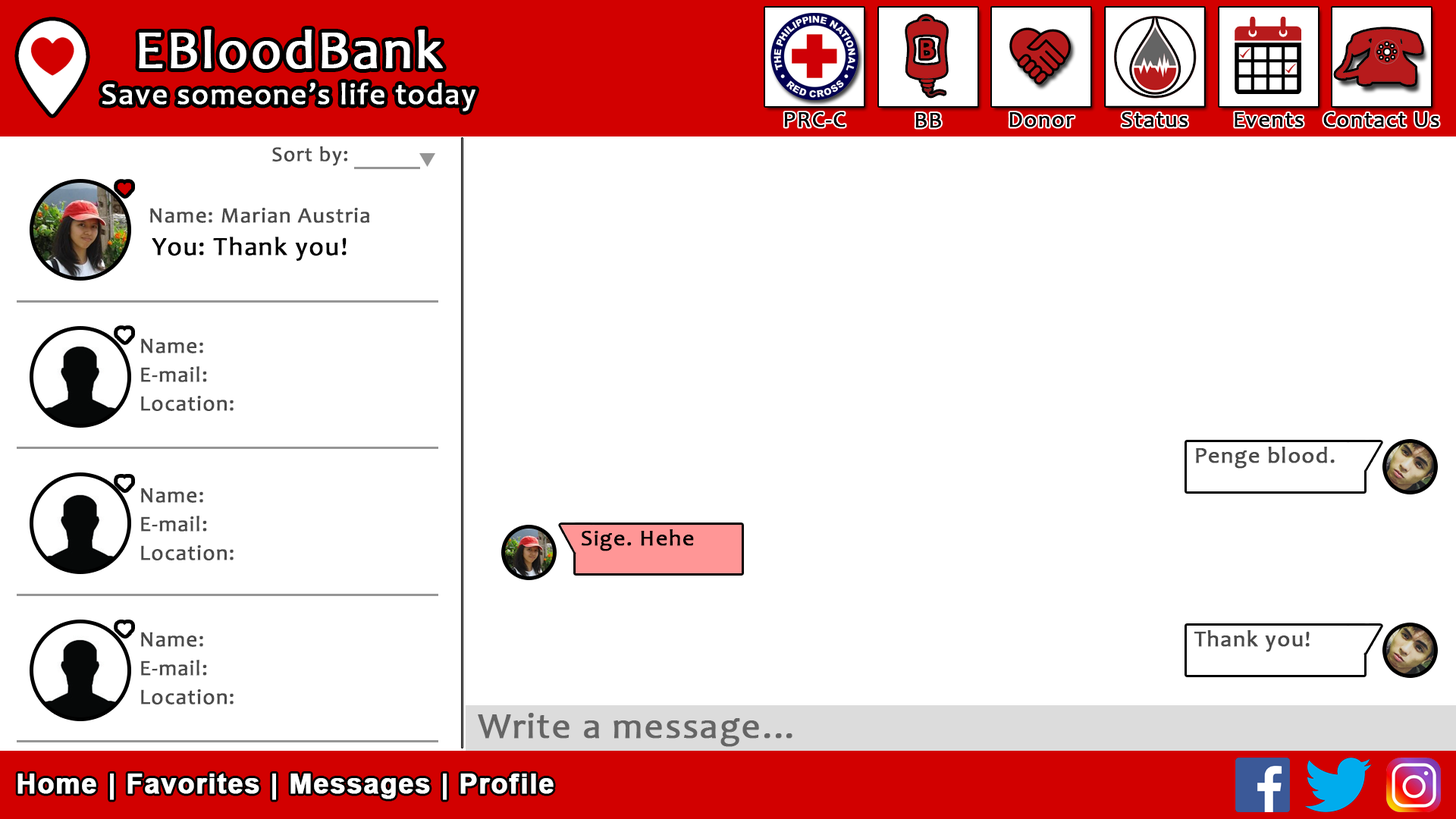
<style>
.page{position:relative;width:1456px;height:819px;background:#ffffff}
.page>*{position:absolute;margin:0}
.t1{font:30.3px "Candara";letter-spacing:0.03em;color:#ffffff;font-weight:bold}
.t2{font:54.6px "Candara";letter-spacing:0.03em;color:#ffffff;font-weight:bold}
.t3{font:22.7px "Candara";letter-spacing:0.03em;color:#000000;font-weight:bold}
.t4{font:20.9px "Candara";letter-spacing:0.03em;color:#4a4a4a;font-weight:bold}
.t5{font:21.8px "Candara";letter-spacing:0.03em;color:#4a4a4a;font-weight:bold}
.t6{font:26.1px "Candara";letter-spacing:0.03em;color:#000000;font-weight:bold}
.t7{font:22.7px "Candara";letter-spacing:0.03em;color:#4a4a4a;font-weight:bold}
.t8{font:36.4px "Candara";letter-spacing:0.03em;color:#656565;font-weight:bold}
.t9{font:27.3px "Arial-BoldMT";letter-spacing:0.03em;color:#ffffff;font-weight:bold}
</style>
<div class="page">
<p class="t1" style="left:102px;top:30px;width:373px;height:81px;text-align:center"><span class="t2">EBloodBank<br></span>Save someone’s life today</p>
<p class="t3" style="left:784px;top:112px;width:62px;height:15px">PRC-C</p>
<p class="t3" style="left:915px;top:113px;width:26px;height:15px">BB</p>
<p class="t3" style="left:1009px;top:112px;width:66px;height:15px">Donor</p>
<p class="t3" style="left:1122px;top:112px;width:66px;height:15px">Status</p>
<p class="t3" style="left:1235px;top:112px;width:69px;height:15px">Events</p>
<p class="t3" style="left:1323px;top:112px;width:116px;height:15px">Contact Us</p>
<p class="t4" style="left:272px;top:146px;width:75px;height:20px">Sort by:</p>
<p class="t5" style="left:150px;top:208px;width:219px;height:15px">Name: Marian Austria</p>
<p class="t6" style="left:152px;top:237px;width:195px;height:24px">You: Thank you!</p>
<p class="t5" style="left:141px;top:338px;width:62px;height:15px">Name:</p>
<p class="t5" style="left:141px;top:366px;width:66px;height:16px">E-mail:</p>
<p class="t5" style="left:141px;top:396px;width:93px;height:15px">Location:</p>
<p class="t7" style="left:1196px;top:447px;width:139px;height:22px">Penge blood.</p>
<p class="t5" style="left:141px;top:488px;width:62px;height:15px">Name:</p>
<p class="t5" style="left:141px;top:516px;width:66px;height:16px">E-mail:</p>
<p class="t3" style="left:582px;top:529px;width:112px;height:22px">Sige. Hehe</p>
<p class="t5" style="left:141px;top:545px;width:93px;height:15px">Location:</p>
<p class="t5" style="left:141px;top:632px;width:62px;height:15px">Name:</p>
<p class="t7" style="left:1194px;top:630px;width:116px;height:22px">Thank you!</p>
<p class="t5" style="left:141px;top:660px;width:66px;height:16px">E-mail:</p>
<p class="t5" style="left:141px;top:689px;width:93px;height:15px">Location:</p>
<p class="t8" style="left:478px;top:713px;width:314px;height:34px">Write a message...</p>
<p class="t9" style="left:17px;top:773px;width:537px;height:27px">Home | Favorites | Messages | Profile</p>
</div>
